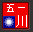
<style>
.page{position:relative;width:33px;height:32px;background:#f20000}
.page>*{position:absolute;margin:0}
.t1{font:10.4px "SimSun";color:#ffffff}
.t2{font:11.7px "SimSun";color:#ffffff}
</style>
<div class="page">
<p class="t1" style="left:7px;top:4px;width:18px;height:8px">五一</p>
<p class="t2" style="left:16px;top:15px;width:11px;height:12px">川</p>
</div>
